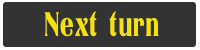
<style>
.page{position:relative;width:200px;height:50px;background:#333333}
.page>*{position:absolute;margin:0}
.t1{font:36px "Titania";letter-spacing:0.025em;color:#f4e112;scale:0.7 1}
</style>
<div class="page">
<p class="t1" style="left:44px;top:11px;width:115px;height:26px">Next turn</p>
</div>
